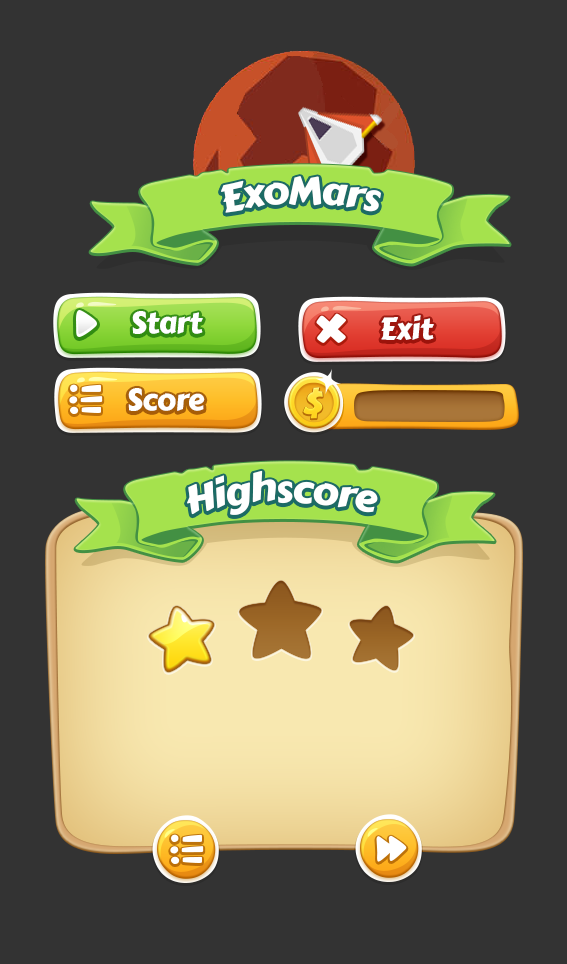
<style>
.page{position:relative;width:567px;height:964px;background:#333333}
.page>*{position:absolute;margin:0}
.t1{font:38px "CarterOne";letter-spacing:-0.02em;color:#ffffff}
.t2{font:30px "CarterOne";letter-spacing:-0.02em;color:#ffffff}
</style>
<div class="page">
<p class="t1" style="left:221px;top:176px;width:160px;height:37px">ExoMars</p>
<p class="t2" style="left:132px;top:311px;width:71px;height:23px">Start</p>
<p class="t2" style="left:381px;top:315px;width:53px;height:25px">Exit</p>
<p class="t2" style="left:128px;top:388px;width:77px;height:23px">Score</p>
<p class="t1" style="left:187px;top:470px;width:191px;height:45px">Highscore</p>
</div>
